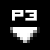
<style>
.page{position:relative;width:50px;height:50px;background:#000000}
.page>*{position:absolute;margin:0}
.t1{font:26.7px "VisitorTT2BRK";letter-spacing:0.02em;color:#ffffff;font-weight:bold}
</style>
<div class="page">
<p class="t1" style="left:12px;top:10px;width:25px;height:11px">p3</p>
</div>
